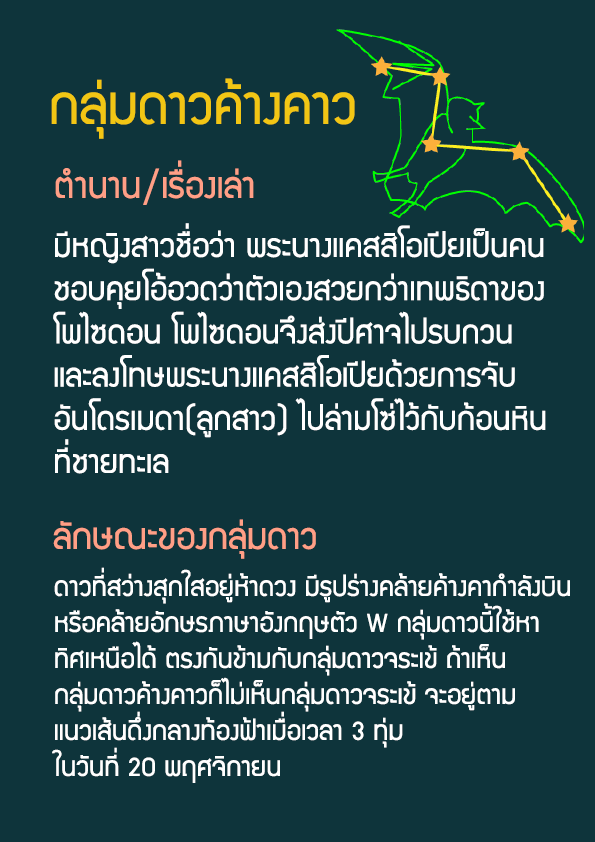
<style>
.page{position:relative;width:595px;height:842px;background:#0e343b}
.page>*{position:absolute;margin:0}
.t1{font:60px "supermarket";color:#f2c614}
.t2{font:40px "supermarket";color:#ff9f86}
.t3{font:36px "supermarket";color:#ffffff}
.t4{font:30px "supermarket";color:#ffffff}
</style>
<div class="page">
<p class="t1" style="left:51px;top:78px;width:304px;height:61px">กลุ่มดาวค้างคาว</p>
<p class="t2" style="left:55px;top:160px;width:199px;height:45px">ตำนาน/เรื่องเล่า</p>
<p class="t3" style="left:53px;top:223px;width:493px;height:251px">มีหญิงสาวชื่อว่า พระนางแคสสิโอเปียเป็นคน<br>ชอบคุยโอ้อวดว่าตัวเองสวยกว่าเทพธิดาของ<br>โพไซดอน โพไซดอนจึงส่งปีศาจไปรบกวน <br>และลงโทษพระนางแคสสิโอเปียด้วยการจับ <br>อันโดรเมดา(ลูกสาว) ไปล่ามโซ่ไว้กับก้อนหิน<br>ที่ชายทะเล</p>
<p class="t2" style="left:53px;top:519px;width:263px;height:40px">ลักษณะของกลุ่มดาว</p>
<p class="t4" style="left:52px;top:567px;width:518px;height:216px">ดาวที่สว่างสุกใสอยู่ห้าดวง มีรูปร่างคล้ายค้างคากำลังบิน <br>หรือคล้ายอักษรภาษาอังกฤษตัว W กลุ่มดาวนี้ใช้หา<br>ทิศเหนือได้ ตรงกันข้ามกับกลุ่มดาวจระเข้ ถ้าเห็น<br>กลุ่มดาวค้างคาวก็ไม่เห็นกลุ่มดาวจระเข้ จะอยู่ตาม<br>แนวเส้นดึ่งกลางท้องฟ้าเมื่อเวลา 3 ทุ่ม<br>ในวันที่ 20 พฤศจิกายน</p>
</div>
